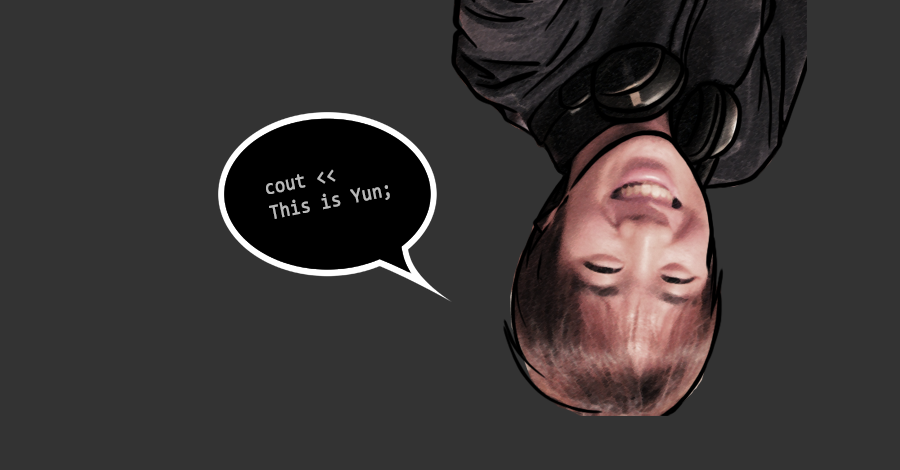
<style>
.page{position:relative;width:900px;height:470px;background:#333333}
.page>*{position:absolute;margin:0}
.t1{font:21px "Consolas";color:#b8b8b8;font-weight:bold;scale:0.86 1}
</style>
<div class="page">
<p class="t1" style="left:266px;top:169px;width:124px;height:50px;rotate:-11deg">cout &lt;&lt; <br>This is Yun;</p>
</div>
